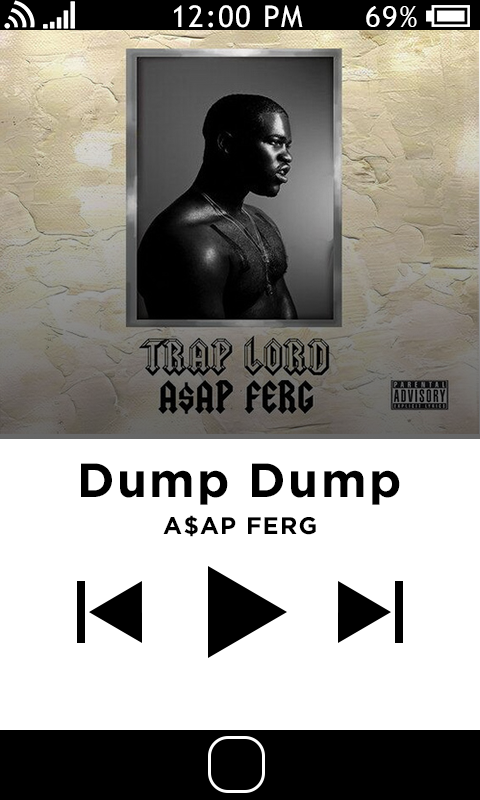
<style>
.page{position:relative;width:480px;height:800px;background:#ffffff}
.page>*{position:absolute;margin:0}
.t1{font:30px "TrebuchetMS";letter-spacing:0.05em;color:#ffffff}
.t2{font:48px "Gotham-Bold";letter-spacing:0.05em;color:#000000}
.t3{font:24px "Gotham-Bold";letter-spacing:0.05em;color:#000000}
</style>
<div class="page">
<p class="t1" style="left:174px;top:5px;width:129px;height:23px">12:00 PM</p>
<p class="t1" style="left:366px;top:6px;width:51px;height:21px">69%</p>
<p class="t2" style="left:81px;top:463px;width:319px;height:42px">Dump Dump</p>
<p class="t3" style="left:163px;top:515px;width:153px;height:22px">A$AP FERG</p>
</div>
